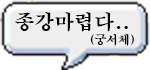
<style>
.page{position:relative;width:150px;height:70px;background:#eeeeee}
.page>*{position:absolute;margin:0}
.t1{font:20px "H2mjrE";color:#000000}
.t2{font:12px "H2mjrE";color:#000000}
</style>
<div class="page">
<p class="t1" style="left:15px;top:12px;width:113px;height:20px">종강마렵다..</p>
<p class="t2" style="left:90px;top:33px;width:44px;height:13px">(궁서체)</p>
</div>
